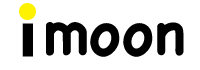
<style>
.page{position:relative;width:200px;height:70px;background:#ffffff}
.page>*{position:absolute;margin:0}
.t1{font:66px "MicrosoftTaiLe-Bold";color:#000000}
.t2{font:60px "Chalkboard-Bold";color:#000000}
</style>
<div class="page">
<p class="t1" style="left:22px;top:7px;width:12px;height:50px">i</p>
<p class="t2" style="left:46px;top:22px;width:138px;height:35px">moon</p>
</div>
